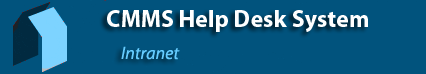
<style>
.page{position:relative;width:426px;height:74px;background:#01537d}
.page>*{position:absolute;margin:0}
.t1{font:24px "MyriadPro-Bold";color:#ffffff}
.t2{font:18px "MyriadPro-It";color:#66ccff}
</style>
<div class="page">
<p class="t1" style="left:107px;top:10px;width:261px;height:22px">CMMS Help Desk System</p>
<p class="t2" style="left:121px;top:46px;width:59px;height:14px">Intranet</p>
</div>
